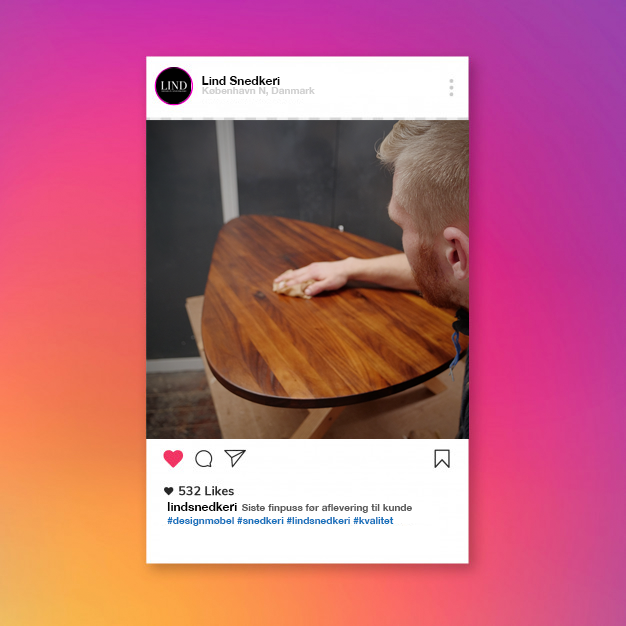
<style>
.page{position:relative;width:626px;height:626px}
.page>*{position:absolute;margin:0}
.t1{font:12px "HelveticaNeue-Bold";color:#070707}
.t2{font:10px "HelveticaNeue-Bold";color:#cfcfcf}
.t3{font:12px "HelveticaNeue-Bold";color:#000000}
.t4{font:10px "HelveticaNeue-Bold";color:#585858}
.t5{font:10px "HelveticaNeue-Bold";color:#1672bc}
</style>
<div class="page">
<p class="t1" style="left:202px;top:76px;width:78px;height:9px">Lind Snedkeri</p>
<p class="t2" style="left:202px;top:87px;width:113px;height:9px">København N, Danmark</p>
<p class="t3" style="left:167px;top:502px;width:70px;height:9px">lindsnedkeri</p>
<p class="t4" style="left:242px;top:504px;width:170px;height:9px">Siste finpuss før aflevering til kunde</p>
<p class="t5" style="left:167px;top:517px;width:227px;height:9px">#designmøbel #snedkeri #lindsnedkeri #kvalitet</p>
</div>
